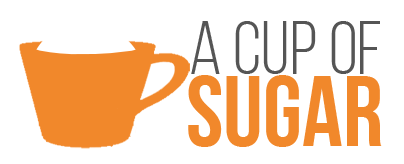
<style>
.page{position:relative;width:404px;height:164px;background:#ffffff}
.page>*{position:absolute;margin:0}
.t1{font:75px "BebasNeueBook";color:#555555}
.t2{font:100px "BebasNeueBold";color:#f1882b}
</style>
<div class="page">
<p class="t1" style="left:191px;top:21px;width:189px;height:53px">A CUP OF</p>
<p class="t2" style="left:188px;top:75px;width:194px;height:72px">SUGAR</p>
</div>
